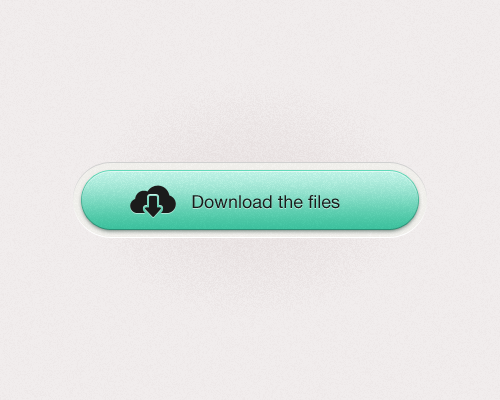
<style>
.page{position:relative;width:500px;height:400px;background:#f1eded}
.page>*{position:absolute;margin:0}
.t1{font:18px "HelveticaNeueLTStd-Roman";color:#1b1b1b}
</style>
<div class="page">
<p class="t1" style="left:192px;top:195px;width:148px;height:14px">Download the files</p>
</div>
